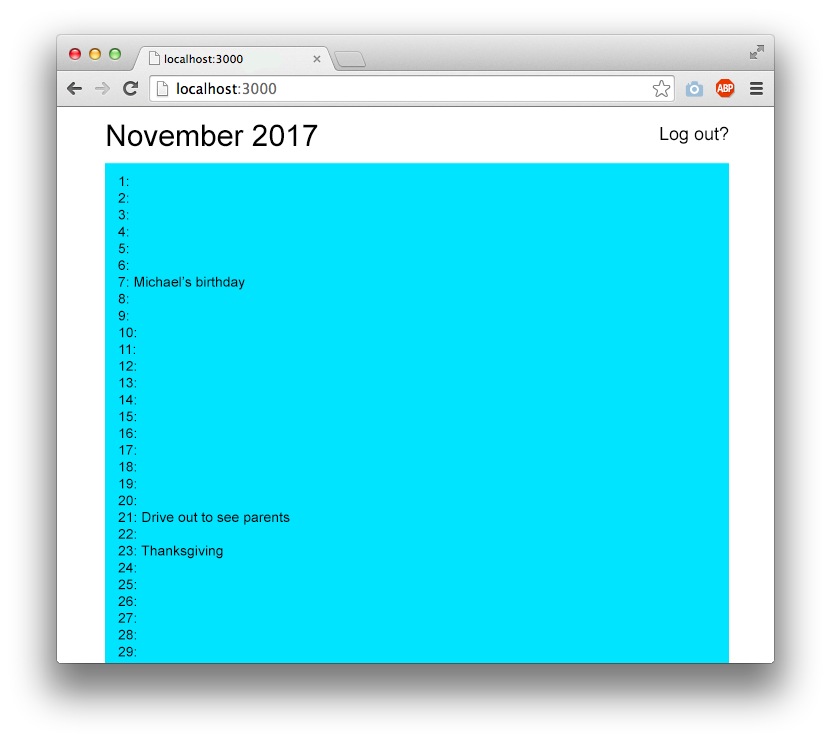
<style>
.page{position:relative;width:831px;height:742px;background:#00e4ff}
.page>*{position:absolute;margin:0}
.t1{font:30px "ArialMT";color:#000000}
.t2{font:18px "ArialMT";color:#000000}
.t3{font:14px "ArialMT";color:#010101}
</style>
<div class="page">
<p class="t1" style="left:107px;top:124px;width:211px;height:23px">November 2017</p>
<p class="t2" style="left:660px;top:126px;width:69px;height:18px">Log out?</p>
<p class="t3" style="left:118px;top:176px;width:172px;height:481px">1:<br>2:<br>3:<br>4:<br>5:<br>6:<br>7: Michael’s birthday<br>8:<br>9:<br>10:<br>11:<br>12:<br>13:<br>14:<br>15:<br>16:<br>17:<br>18:<br>19:<br>20:<br>21: Drive out to see parents<br>22:<br>23: Thanksgiving<br>24:<br>25:<br>26:<br>27:<br>28:<br>29:</p>
</div>
